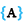
<style>
.page{position:relative;width:24px;height:24px;background:#ffffff}
.page>*{position:absolute;margin:0}
.t1{font:16px "TimesNewRomanPSMT";color:#25b5f1;font-weight:bold}
.t2{font:13.3px "TimesNewRomanPSMT";color:#020000;font-weight:bold}
</style>
<div class="page">
<p class="t1" style="left:0px;top:6px;width:23px;height:15px">{<span class="t2">A</span>}</p>
</div>
